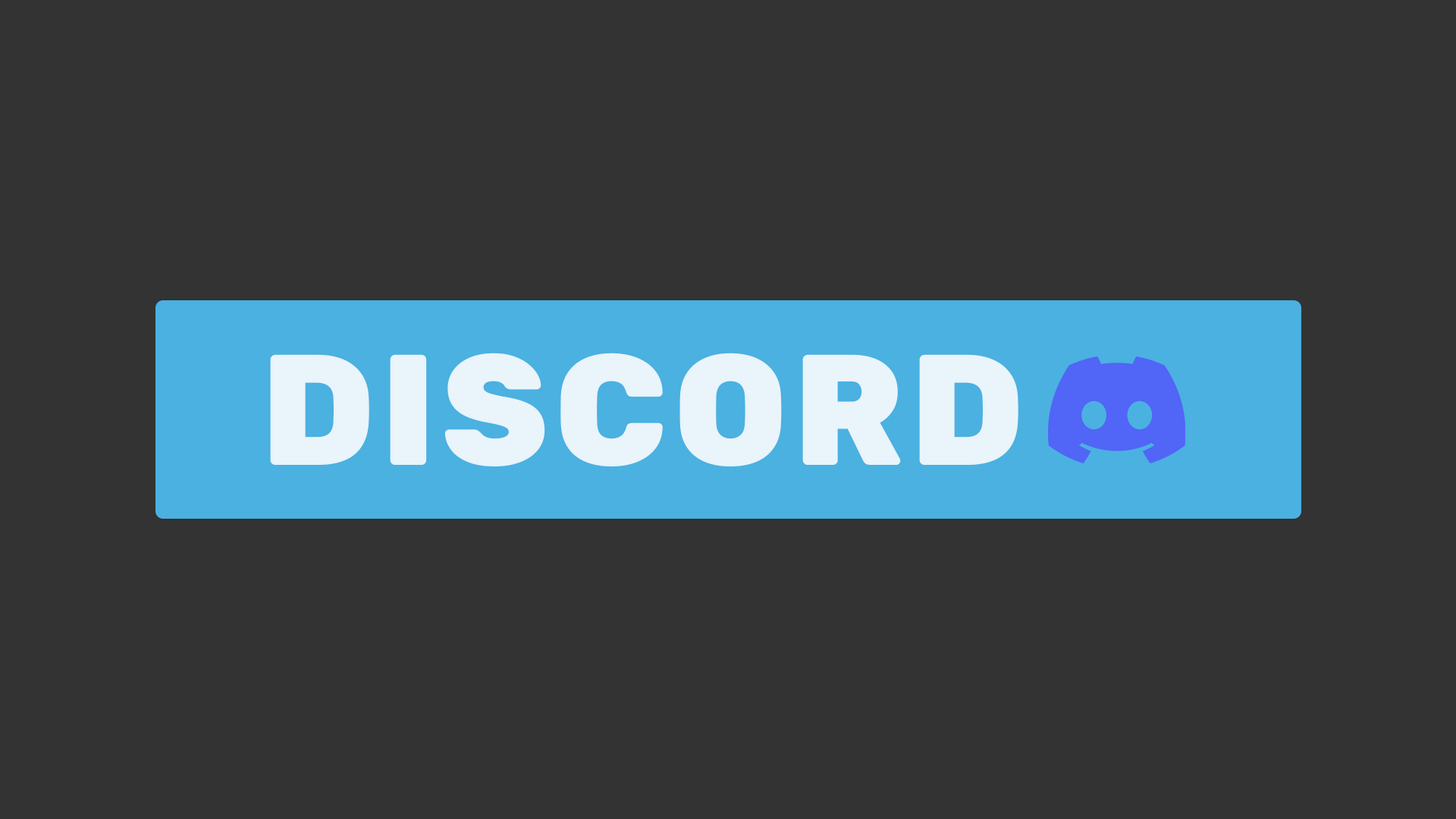
<style>
.page{position:relative;width:1456px;height:819px;background:#333333}
.page>*{position:absolute;margin:0}
.t1{font:155.1px "Rubik-ExtraBold";letter-spacing:0.02em;color:#ffffff;font-weight:bold}
</style>
<div class="page">
<p class="t1" style="left:270px;top:353px;width:748px;height:114px;opacity:0.85">DISCORD</p>
</div>
